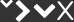
<style>
.page{position:relative;width:74px;height:22px;background:#333333}
.page>*{position:absolute;margin:0}
.t1{font:36px "Rubik-Light";color:#ffffff}
</style>
<div class="page">
<p class="t1" style="left:57px;top:1px;width:17px;height:19px">x</p>
</div>
